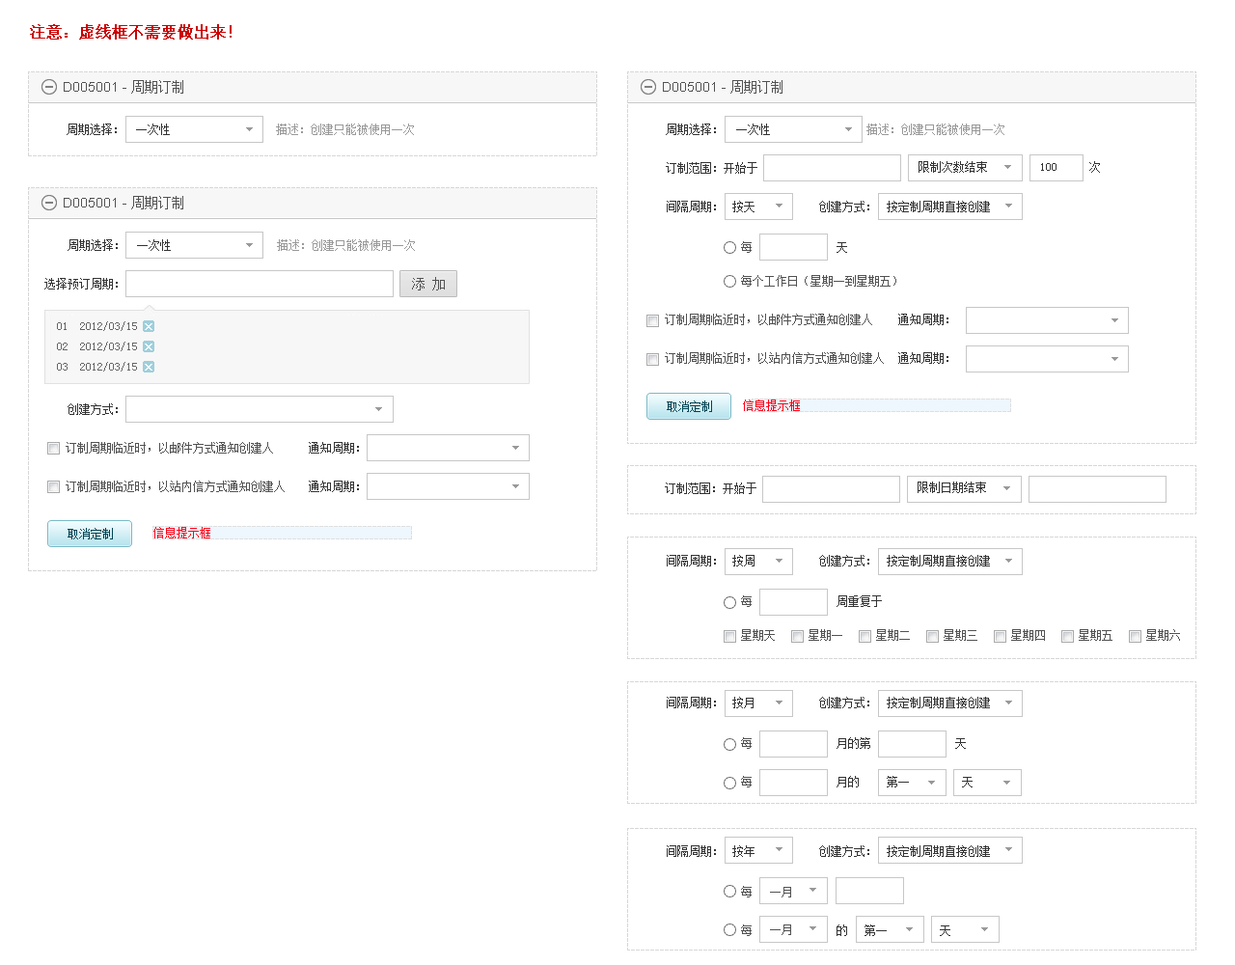
<style>
.page{position:relative;width:1235px;height:965px;background:#ffffff}
.page>*{position:absolute;margin:0}
.t1{font:15.4px "SimSun";color:#cc0000;font-weight:bold}
.t2{font:13.5px "ArialMT";color:#525252}
.t3{font:13.5px "SimSun";color:#525252}
.t4{font:11.6px "SimSun";color:#333333}
.t5{font:11.6px "SimSun";color:#999999}
.t6{font:11.6px "SimSun";color:#525252}
.t7{font:11.6px/20.3px "SimSun";color:#666666}
</style>
<div class="page">
<p class="t1" style="left:30px;top:24px;width:202px;height:16px">注意：虚线框不需要做出来！</p>
<p class="t2" style="left:64px;top:80px;width:119px;height:14px">D005001 - <span class="t3">周期订制</span></p>
<p class="t2" style="left:663px;top:80px;width:120px;height:14px">D005001 - <span class="t3">周期订制</span></p>
<p class="t4" style="left:666px;top:124px;width:50px;height:11px">周期选择：</p>
<p class="t4" style="left:736px;top:124px;width:34px;height:11px">一次性</p>
<p class="t5" style="left:867px;top:124px;width:138px;height:11px">描述：创建只能被使用一次</p>
<p class="t4" style="left:919px;top:161px;width:68px;height:12px">限制次数结束</p>
<p class="t4" style="left:1090px;top:161px;width:10px;height:12px">次</p>
<p class="t4" style="left:666px;top:162px;width:50px;height:12px">订制范围：</p>
<p class="t4" style="left:724px;top:162px;width:34px;height:12px">开始于</p>
<p class="t4" style="left:1041px;top:163px;width:16px;height:8px">100</p>
<p class="t2" style="left:64px;top:196px;width:119px;height:13px">D005001 - <span class="t3">周期订制</span></p>
<p class="t4" style="left:667px;top:201px;width:49px;height:11px">间隔周期：</p>
<p class="t4" style="left:733px;top:201px;width:22px;height:11px">按天</p>
<p class="t4" style="left:819px;top:201px;width:51px;height:11px">创建方式：</p>
<p class="t4" style="left:887px;top:201px;width:103px;height:11px">按定制周期直接创建</p>
<p class="t4" style="left:68px;top:239px;width:50px;height:12px">周期选择：</p>
<p class="t4" style="left:137px;top:239px;width:34px;height:12px">一次性</p>
<p class="t5" style="left:277px;top:239px;width:138px;height:12px">描述：创建只能被使用一次</p>
<p class="t6" style="left:741px;top:241px;width:11px;height:12px">每</p>
<p class="t4" style="left:837px;top:242px;width:10px;height:11px">天</p>
<p class="t4" style="left:44px;top:278px;width:74px;height:12px">选择预订周期：</p>
<p class="t6" style="left:741px;top:275px;width:156px;height:12px">每个工作日（星期一到星期五）</p>
<p class="t6" style="left:665px;top:314px;width:208px;height:11px">订制周期临近时，以邮件方式通知创建人</p>
<p class="t4" style="left:899px;top:314px;width:50px;height:11px">通知周期：</p>
<p class="t7" style="left:57px;top:321px;width:80px;height:51px">01  2012/03/15<br>02  2012/03/15<br>03  2012/03/15</p>
<p class="t6" style="left:665px;top:352px;width:219px;height:12px">订制周期临近时，以站内信方式通知创建人</p>
<p class="t4" style="left:899px;top:352px;width:50px;height:12px">通知周期：</p>
<p class="t4" style="left:68px;top:403px;width:50px;height:12px">创建方式：</p>
<p class="t6" style="left:66px;top:442px;width:207px;height:12px">订制周期临近时，以邮件方式通知创建人</p>
<p class="t4" style="left:309px;top:442px;width:50px;height:12px">通知周期：</p>
<p class="t6" style="left:66px;top:481px;width:219px;height:11px">订制周期临近时，以站内信方式通知创建人</p>
<p class="t4" style="left:309px;top:481px;width:50px;height:11px">通知周期：</p>
<p class="t4" style="left:665px;top:483px;width:50px;height:11px">订制范围：</p>
<p class="t4" style="left:723px;top:483px;width:34px;height:11px">开始于</p>
<p class="t4" style="left:918px;top:482px;width:68px;height:11px">限制日期结束</p>
<p class="t4" style="left:667px;top:555px;width:49px;height:12px">间隔周期：</p>
<p class="t4" style="left:733px;top:555px;width:22px;height:12px">按周</p>
<p class="t4" style="left:819px;top:555px;width:51px;height:12px">创建方式：</p>
<p class="t4" style="left:887px;top:555px;width:103px;height:12px">按定制周期直接创建</p>
<p class="t6" style="left:741px;top:596px;width:11px;height:11px">每</p>
<p class="t4" style="left:837px;top:596px;width:45px;height:11px">周重复于</p>
<p class="t6" style="left:741px;top:629px;width:34px;height:12px">星期天</p>
<p class="t6" style="left:809px;top:629px;width:34px;height:12px">星期一</p>
<p class="t6" style="left:876px;top:629px;width:34px;height:12px">星期二</p>
<p class="t6" style="left:944px;top:629px;width:34px;height:12px">星期三</p>
<p class="t6" style="left:1012px;top:629px;width:33px;height:12px">星期四</p>
<p class="t6" style="left:1079px;top:629px;width:34px;height:12px">星期五</p>
<p class="t6" style="left:1147px;top:629px;width:33px;height:12px">星期六</p>
<p class="t4" style="left:667px;top:697px;width:49px;height:11px">间隔周期：</p>
<p class="t4" style="left:733px;top:697px;width:21px;height:11px">按月</p>
<p class="t4" style="left:819px;top:697px;width:51px;height:11px">创建方式：</p>
<p class="t4" style="left:887px;top:697px;width:103px;height:11px">按定制周期直接创建</p>
<p class="t6" style="left:741px;top:737px;width:11px;height:12px">每</p>
<p class="t4" style="left:837px;top:737px;width:34px;height:12px">月的第</p>
<p class="t4" style="left:956px;top:738px;width:10px;height:11px">天</p>
<p class="t6" style="left:741px;top:776px;width:11px;height:12px">每</p>
<p class="t4" style="left:837px;top:776px;width:22px;height:12px">月的</p>
<p class="t4" style="left:887px;top:776px;width:22px;height:12px">第一</p>
<p class="t4" style="left:962px;top:777px;width:11px;height:11px">天</p>
<p class="t4" style="left:667px;top:846px;width:49px;height:11px">间隔周期：</p>
<p class="t4" style="left:733px;top:846px;width:22px;height:11px">按年</p>
<p class="t4" style="left:819px;top:846px;width:51px;height:11px">创建方式：</p>
<p class="t4" style="left:887px;top:846px;width:103px;height:11px">按定制周期直接创建</p>
<p class="t6" style="left:741px;top:886px;width:11px;height:12px">每</p>
<p class="t6" style="left:770px;top:887px;width:21px;height:11px">一月</p>
<p class="t6" style="left:741px;top:925px;width:11px;height:11px">每</p>
<p class="t6" style="left:770px;top:925px;width:21px;height:10px">一月</p>
<p class="t4" style="left:837px;top:925px;width:10px;height:11px">的</p>
<p class="t4" style="left:865px;top:925px;width:22px;height:11px">第一</p>
<p class="t4" style="left:940px;top:926px;width:11px;height:10px">天</p>
</div>
